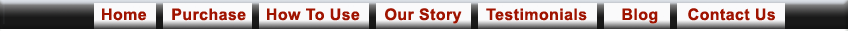
<style>
.page{position:relative;width:848px;height:31px;background:#fafafb}
.page>*{position:absolute;margin:0}
.t1{font:16px "Arial-BoldMT";letter-spacing:0.025em;color:#9f1300}
</style>
<div class="page">
<p class="t1" style="left:102px;top:8px;width:673px;height:16px">Home     Purchase    How To Use     Our Story     Testimonials       Blog      Contact Us</p>
<p class="t1" style="left:102px;top:8px;width:673px;height:16px">Home     Purchase    How To Use     Our Story     Testimonials       Blog      Contact Us</p>
</div>
